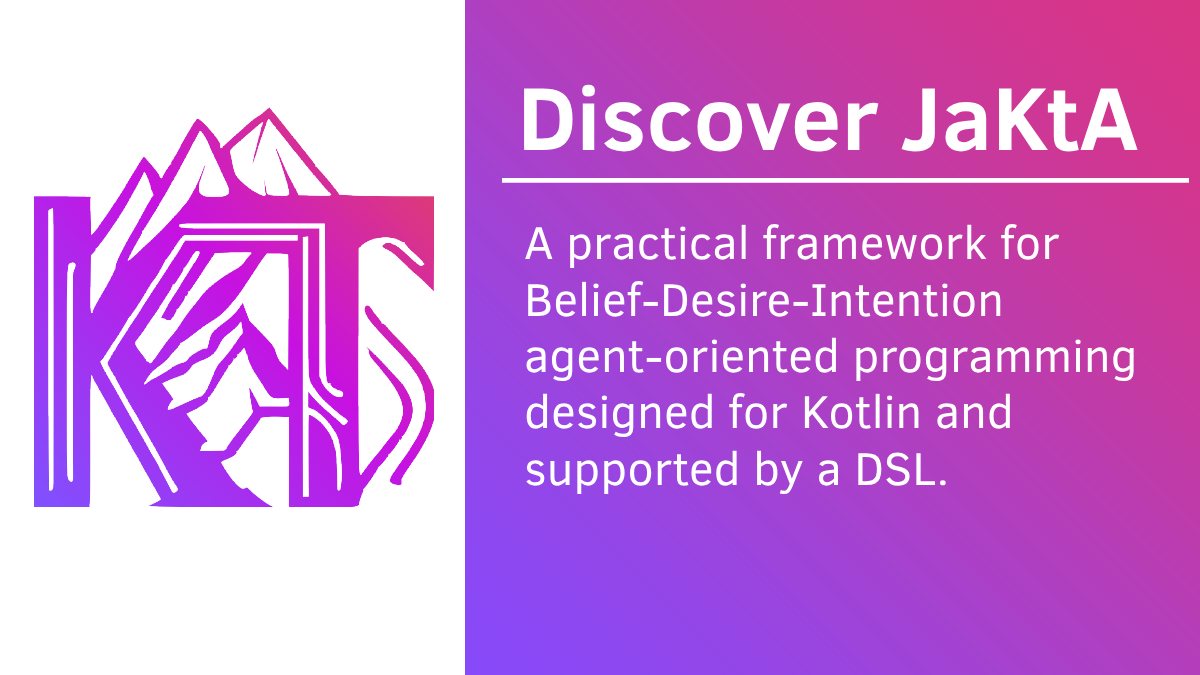
<style>
.page{position:relative;width:1200px;height:675px;background:#ffffff}
.page>*{position:absolute;margin:0}
.t1{font:91px "ClearSans-Bold";color:#ffffff}
.t2{font:47px "ClearSans";color:#ffffff}
</style>
<div class="page">
<p class="t1" style="left:524px;top:84px;width:614px;height:68px">Discover JaKtA</p>
<p class="t2" style="left:525px;top:224px;width:609px;height:271px">A practical framework for Belief-Desire-Intention agent-oriented programming designed for Kotlin and supported by a DSL.</p>
</div>
